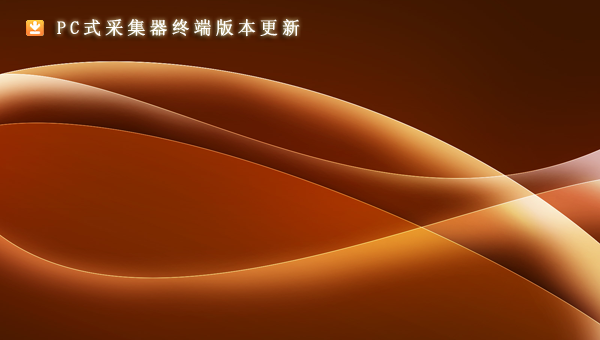
<style>
.page{position:relative;width:600px;height:340px}
.page>*{position:absolute;margin:0}
.t1{font:18px "NSimSun";letter-spacing:0.2em;color:#ffffff;font-weight:bold}
</style>
<div class="page">
<p class="t1" style="left:57px;top:18px;width:243px;height:19px">PC式采集器终端版本更新</p>
</div>
